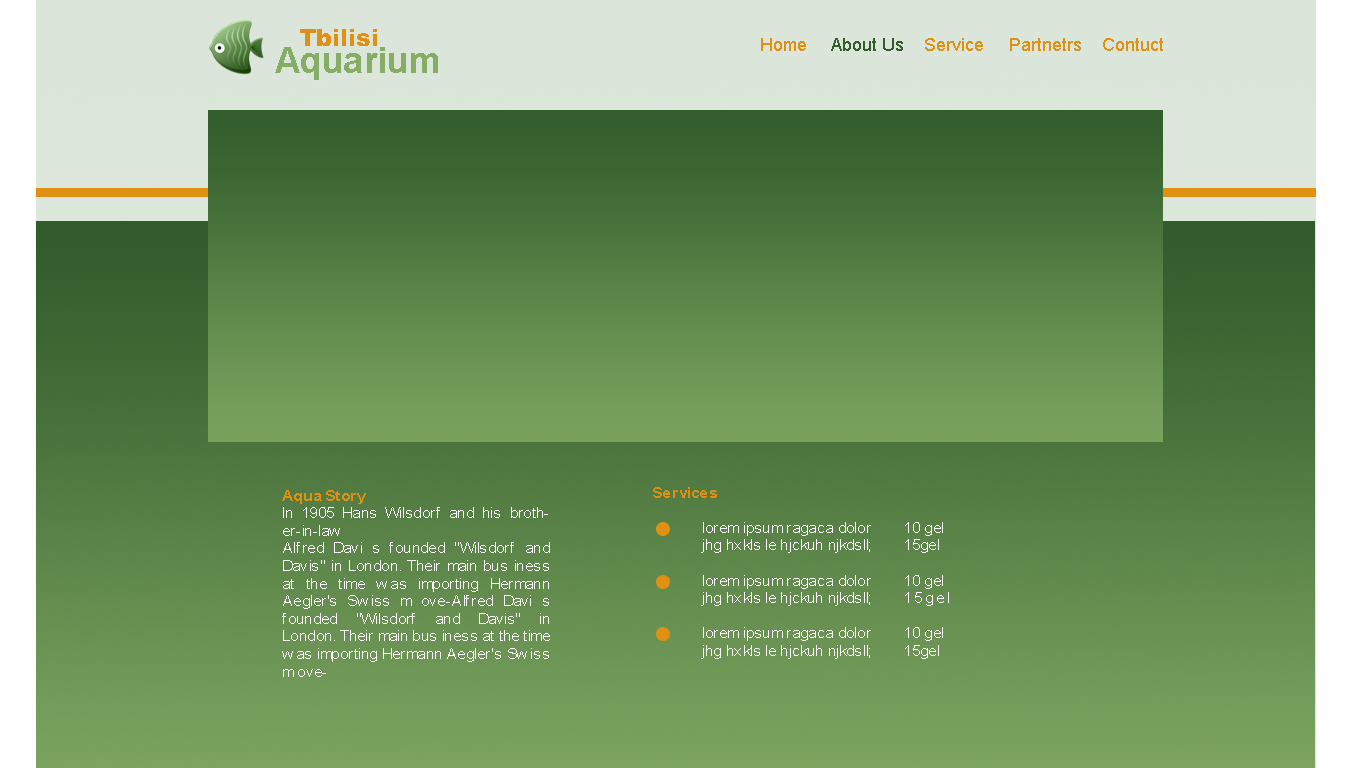
<style>
.page{position:relative;width:1366px;height:768px}
.page>*{position:absolute;margin:0}
.t1{font:23.6px "Arial-Black";color:#e09013}
.t2{font:18px "ArialMT";color:#e09013}
.t3{font:18px "ArialMT";color:#335e2c}
.t4{font:36px "Arial-BoldMT";color:#85ad66}
.t5{font:14.7px "ArialMT";color:#ffffff;scale:1.06 1}
.t6{font:14.7px "Arial-BoldMT";color:#e09013;scale:1.06 1}
</style>
<div class="page">
<p class="t1" style="left:300px;top:29px;width:77px;height:17px">Tbilisi</p>
<p class="t2" style="left:761px;top:38px;width:402px;height:13px">Home     <span class="t3">About Us</span>    Service     Partnetrs    Contuct</p>
<p class="t4" style="left:275px;top:47px;width:163px;height:33px">Aquarium</p>
<p class="t5" style="left:282px;top:490px;width:268px;height:187px;text-align:justify"><span class="t6">Aqua Story<br></span>In 1905 Hans Wilsdorf and his brother-in-law <br>Alfred Davi s founded "Wilsdorf and Davis" in London. Their main bus iness at the time was importing Hermann Aegler's Swiss m ove-Alfred Davi s founded "Wilsdorf and Davis" in London. Their main bus iness at the time was importing Hermann Aegler's Swiss m ove-</p>
<p class="t5" style="left:653px;top:487px;width:296px;height:172px;text-align:justify"><span class="t6">Services<br></span>      <br> lorem ipsum ragaca dolor 10 gel<br> jhg hxkls le hjckuh njkdsll; 15gel<br><br> lorem ipsum ragaca dolor 10 gel<br> jhg hxkls le hjckuh njkdsll; 15gel<br><br> lorem ipsum ragaca dolor 10 gel<br> jhg hxkls le hjckuh njkdsll; 15gel</p>
</div>
